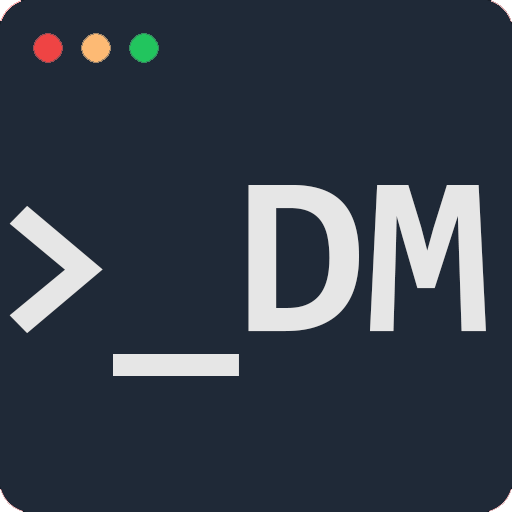
<style>
.page{position:relative;width:512px;height:512px;background:#1f2937}
.page>*{position:absolute;margin:0}
.t1{font:229.2px "Consolas-Bold";color:#e6e6e6}
</style>
<div class="page">
<p class="t1" style="left:9px;top:185px;width:477px;height:191px">&gt;_DM</p>
</div>
